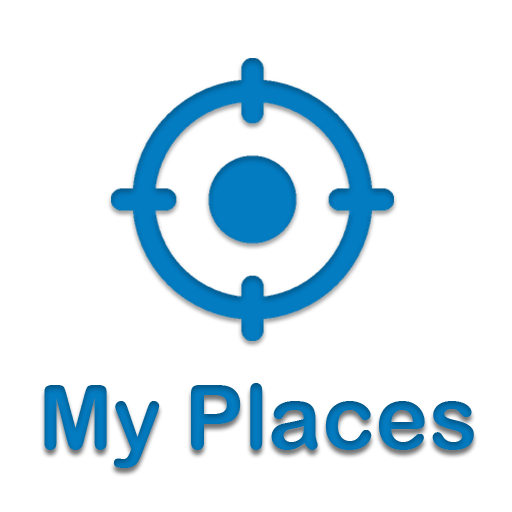
<style>
.page{position:relative;width:512px;height:512px;background:#ffffff}
.page>*{position:absolute;margin:0}
.t1{font:90px "ArialRoundedMTBold";color:#0374b6}
</style>
<div class="page">
<p class="t1" style="left:44px;top:383px;width:430px;height:85px">My Places</p>
</div>
